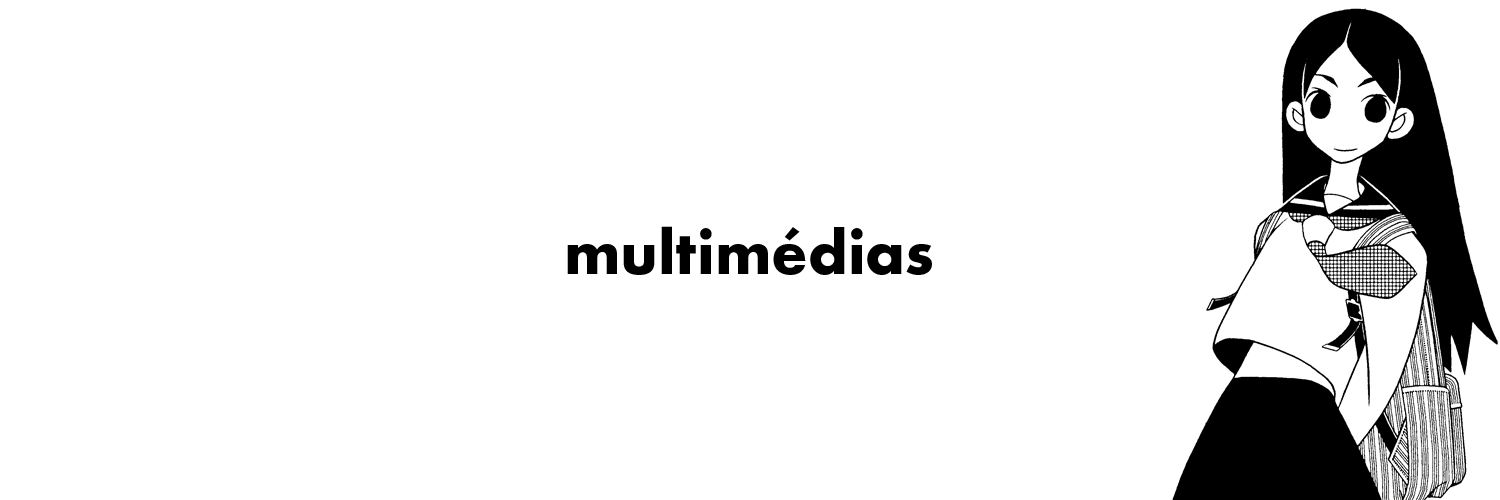
<style>
.page{position:relative;width:1500px;height:500px;background:#ffffff}
.page>*{position:absolute;margin:0}
.t1{font:64.3px "Futura-Bold";color:#000000}
</style>
<div class="page">
<p class="t1" style="left:567px;top:226px;width:365px;height:49px">multimédias</p>
</div>
